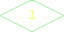
<style>
.page{position:relative;width:64px;height:32px;background:#ffffff}
.page>*{position:absolute;margin:0}
.t1{font:14px "SourceCodePro-Regular";color:#f9f977}
</style>
<div class="page">
<p class="t1" style="left:29px;top:10px;width:7px;height:9px">1</p>
</div>
